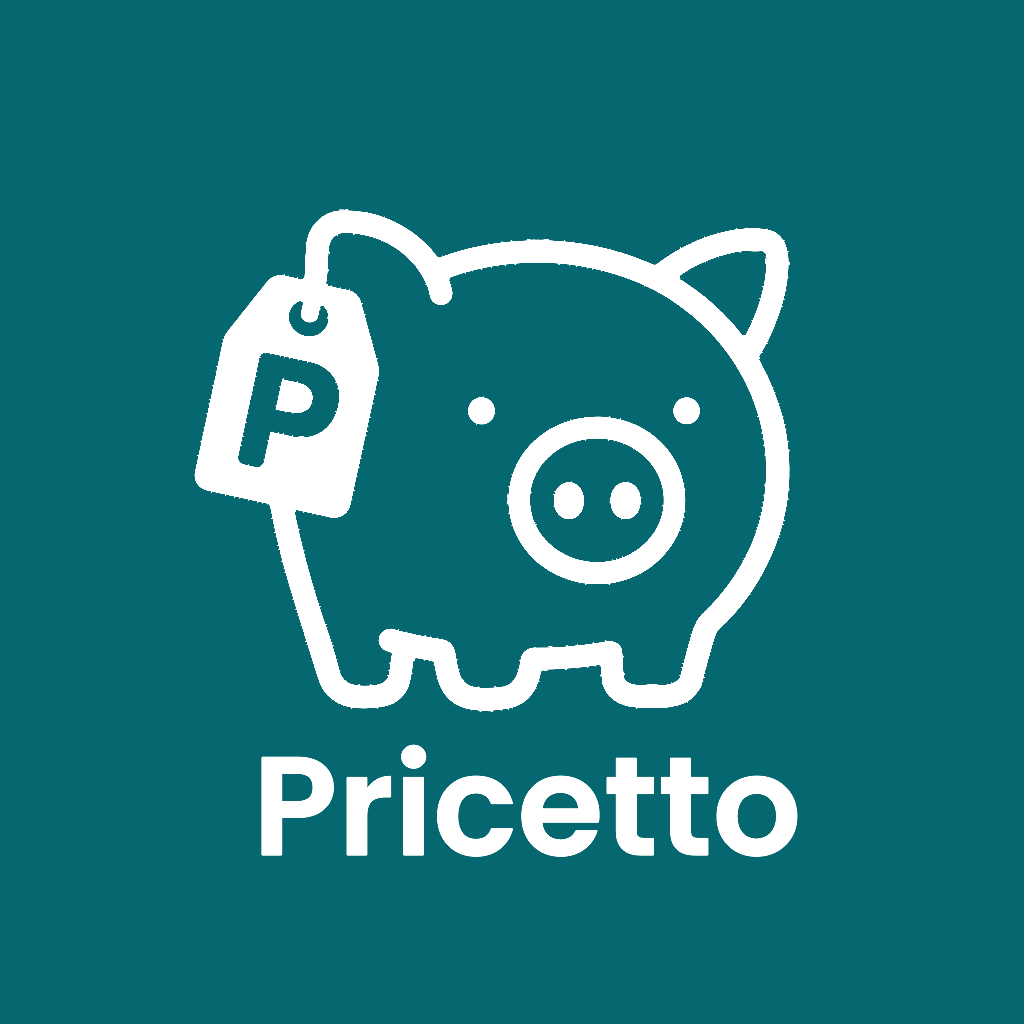
<style>
.page{position:relative;width:1024px;height:1024px;background:#056870}
.page>*{position:absolute;margin:0}
.t1{font:140px "Poppins-SemiBold";color:#ffffff}
</style>
<div class="page">
<p class="t1" style="left:261px;top:744px;width:537px;height:114px">Pricetto</p>
</div>
